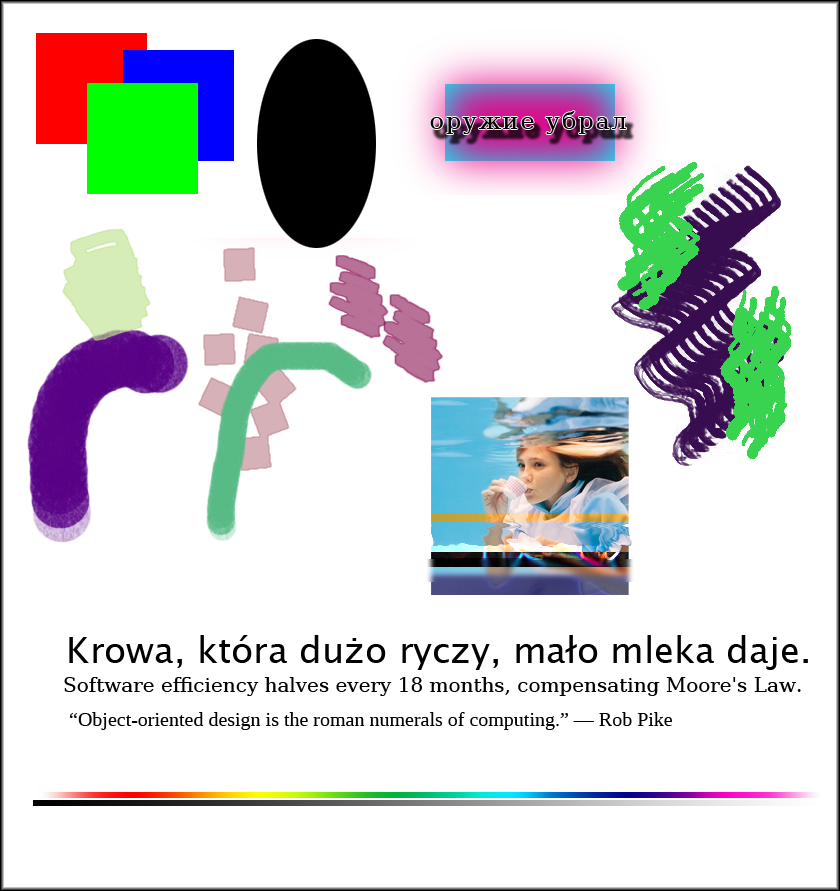
<style>
.page{position:relative;width:840px;height:891px;background:#ffffff}
.page>*{position:absolute;margin:0}
.t1{font:24px "DejaVuSerif";letter-spacing:0.075em;color:#000000}
.t2{font:36px "LucidaSansUnicode";color:#000000}
.t3{font:20px "DejaVuSerif";color:#000000}
.t4{font:20px "LiberationSerif";color:#000000}
</style>
<div class="page">
<p class="t1" style="left:430px;top:111px;width:196px;height:23px">оружие убрал</p>
<p class="t2" style="left:69px;top:635px;width:739px;height:35px">Krowa, która dużo ryczy, mało mleka daje.</p>
<p class="t3" style="left:64px;top:677px;width:737px;height:19px">Software efficiency halves every 18 months, compensating Moore's Law.</p>
<p class="t4" style="left:69px;top:712px;width:603px;height:18px">“Object-oriented design is the roman numerals of computing.” — Rob Pike</p>
</div>
